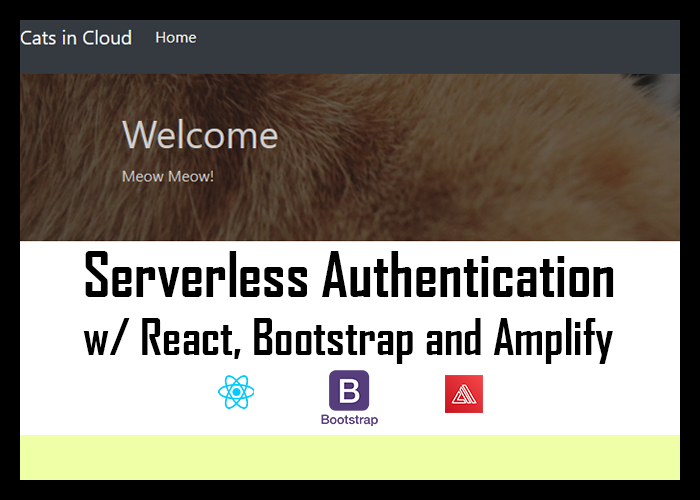
<style>
.page{position:relative;width:700px;height:500px;background:#ffffff}
.page>*{position:absolute;margin:0}
.t1{font:48px "AgencyFB-Bold";color:#000000}
.t2{font:60px "AgencyFB-Bold";color:#000000}
</style>
<div class="page">
<p class="t1" style="left:83px;top:251px;width:531px;height:113px"><span class="t2">Serverless Authentication<br></span>w/ React, Bootstrap and Amplify</p>
</div>
